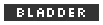
<style>
.page{position:relative;width:103px;height:25px;background:#333333}
.page>*{position:absolute;margin:0}
.t1{font:15px "Silkscreen";color:#ffffff}
</style>
<div class="page">
<p class="t1" style="left:17px;top:8px;width:68px;height:9px">BLADDER</p>
</div>
